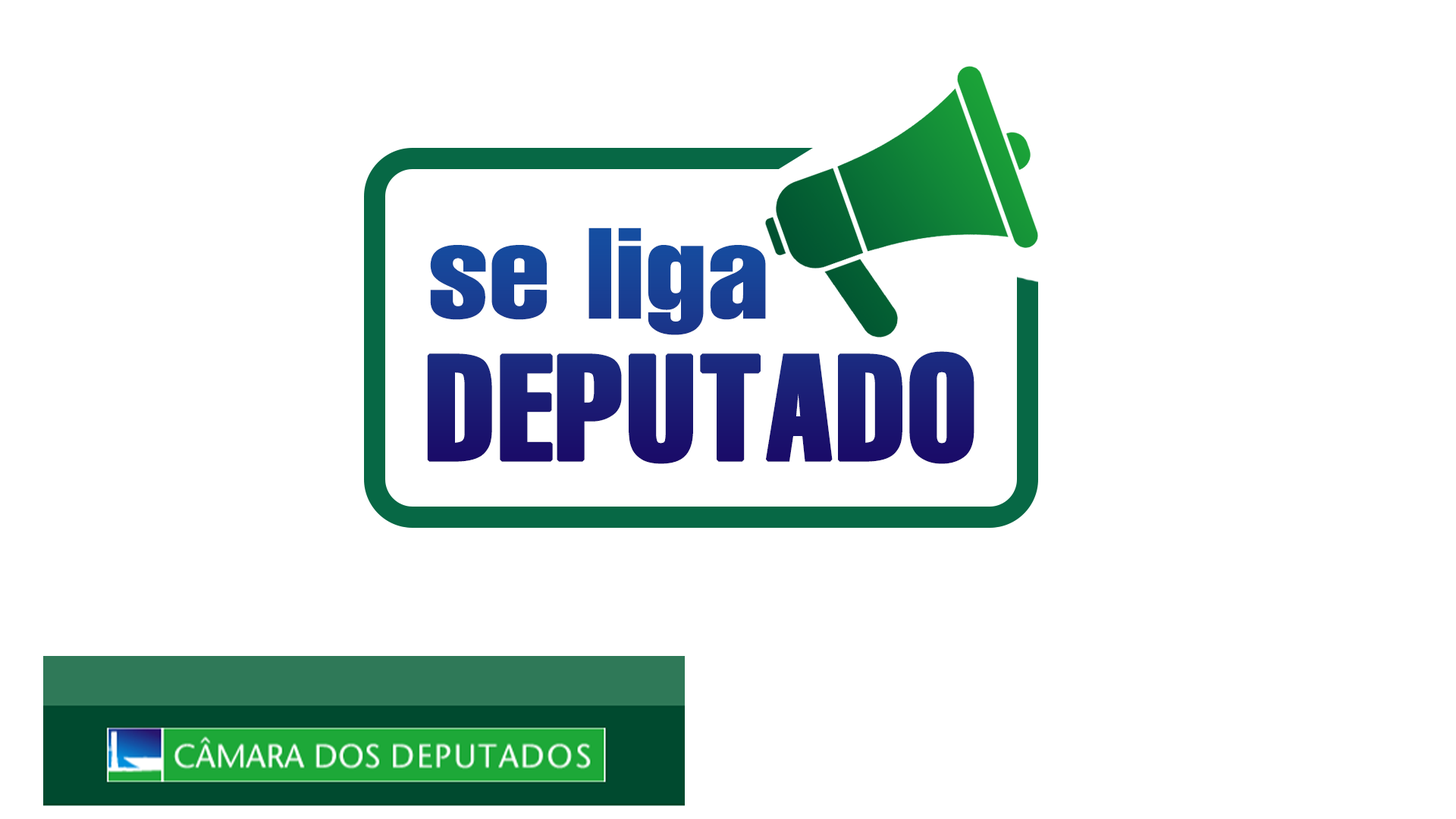
<style>
.page{position:relative;width:1456px;height:819px;background:#ffffff}
.page>*{position:absolute;margin:0}
.t1{font:145.9px/141px "HelveticaLT-Compressed";text-transform:uppercase;font-weight:bold}
.t2{font:127px/141px "HelveticaLT-Compressed";scale:1.15 1}
</style>
<div class="page">
<p class="t1" style="left:427px;top:227px;width:547px;height:237px"><span class="t2">se liga<br></span>Deputado</p>
</div>
